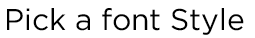
<style>
.page{position:relative;width:255px;height:38px;background:#ffffff}
.page>*{position:absolute;margin:0}
.t1{font:30px "Gotham-Book";color:#000000}
</style>
<div class="page">
<p class="t1" style="left:7px;top:8px;width:237px;height:27px">Pick a font Style</p>
</div>
